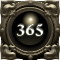
<style>
.page{position:relative;width:60px;height:60px}
.page>*{position:absolute;margin:0}
.t1{font:18px "ArnoPro-Bold";color:#ffffff}
</style>
<div class="page">
<p class="t1" style="left:16px;top:23px;width:27px;height:13px">365</p>
</div>
